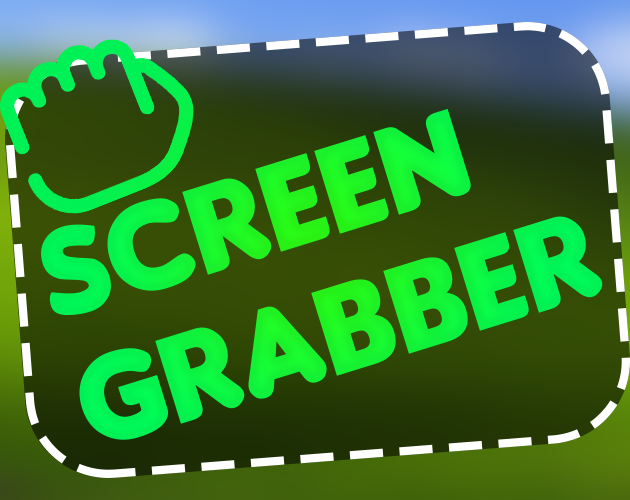
<style>
.page{position:relative;width:630px;height:500px}
.page>*{position:absolute;margin:0}
.t1{font:131.4px/134.9px "Insaniburger-with-Cheese";letter-spacing:0.015em}
</style>
<div class="page">
<p class="t1" style="left:41px;top:108px;width:562px;height:332px;rotate:-17deg">Screen<br>Grabber</p>
</div>
